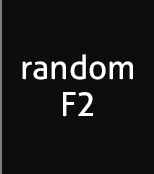
<style>
.page{position:relative;width:154px;height:174px;background:#0d0d0d}
.page>*{position:absolute;margin:0}
.t1{font:33.3px "Aller-Regular";color:#ffffff}
</style>
<div class="page">
<p class="t1" style="left:22px;top:54px;width:111px;height:26px">random</p>
<p class="t1" style="left:63px;top:92px;width:31px;height:25px">F2</p>
</div>
